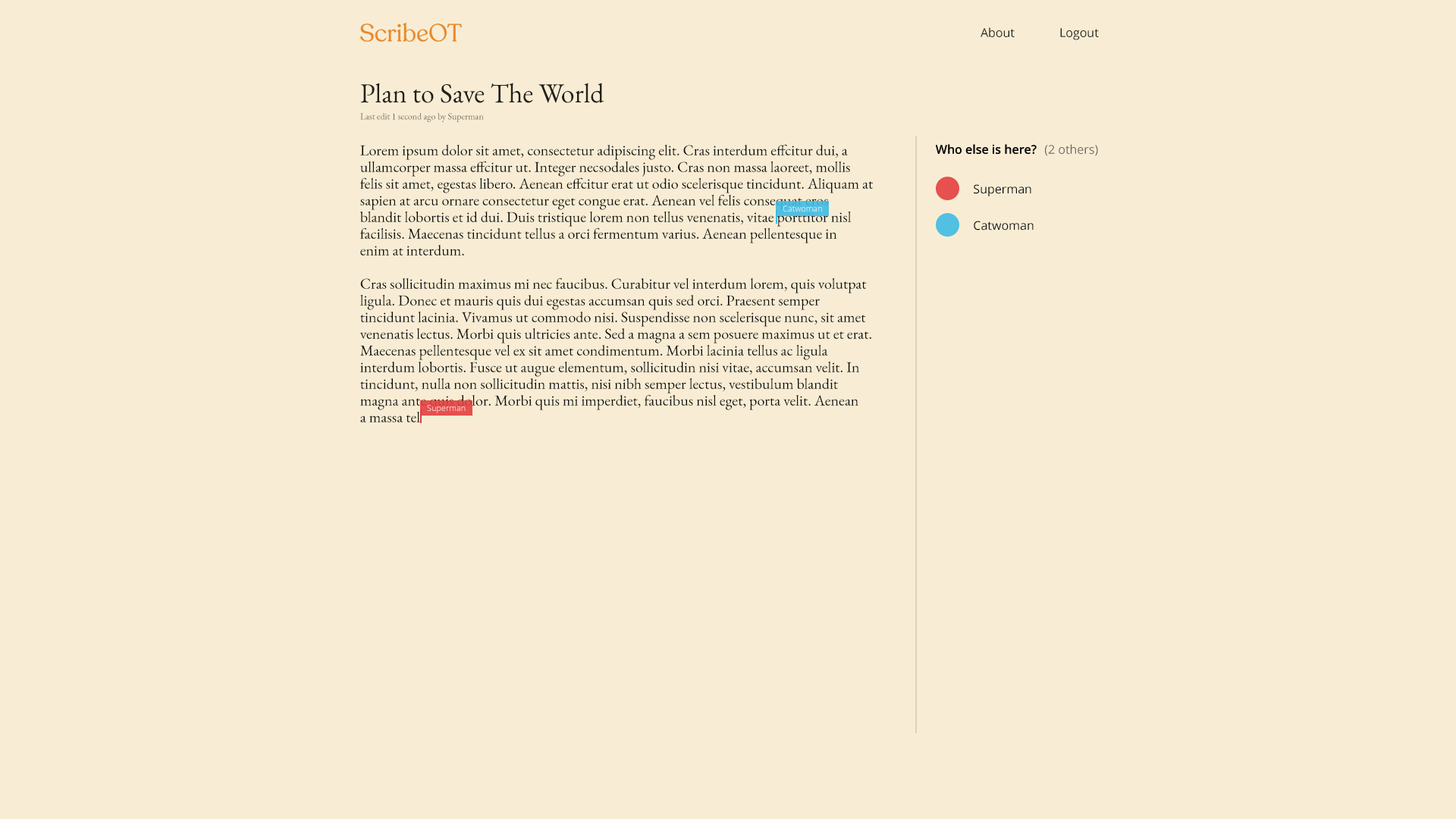
<style>
.page{position:relative;width:1456px;height:819px;background:#f8edd4}
.page>*{position:absolute;margin:0}
.t1{font:12.1px "OpenSans-Regular";color:#21201c}
.t2{font:27.3px "EBGaramond-Regular";color:#21201c}
.t3{font:9.1px "EBGaramond-Regular";color:#6d6a63}
.t4{font:15.2px/16.7px "EBGaramond-Regular";color:#0d0d0d}
.t5{font:12.1px "OpenSans-SemiBold";color:#0d0d0d}
.t6{font:12.1px "OpenSans-Regular";color:#6d6a63}
.t7{font:12.1px "OpenSans-Regular";color:#0d0d0d}
.t8{font:8.3px "OpenSans-Light"}
</style>
<div class="page">
<p class="t1" style="left:981px;top:27px;width:34px;height:10px">About</p>
<p class="t1" style="left:1060px;top:28px;width:39px;height:12px">Logout</p>
<p class="t2" style="left:360px;top:83px;width:244px;height:20px">Plan to Save The World</p>
<p class="t3" style="left:360px;top:113px;width:124px;height:9px">Last edit 1 second ago by Superman</p>
<p class="t4" style="left:359px;top:144px;width:514px;height:278px">Lorem ipsum dolor sit amet, consectetur adipiscing elit. Cras interdum effcitur dui, a <br>ullamcorper massa effcitur ut. Integer necsodales justo. Cras non massa laoreet, mollis <br>felis sit amet, egestas libero. Aenean effcitur erat ut odio scelerisque tincidunt. Aliquam at <br>sapien at arcu ornare consectetur eget congue erat. Aenean vel felis consequat eros <br>blandit lobortis et id dui. Duis tristique lorem non tellus venenatis, vitae porttitor nisl <br>facilisis. Maecenas tincidunt tellus a orci fermentum varius. Aenean pellentesque in <br>enim at interdum. <br><br>Cras sollicitudin maximus mi nec faucibus. Curabitur vel interdum lorem, quis volutpat <br>ligula. Donec et mauris quis dui egestas accumsan quis sed orci. Praesent semper <br>tincidunt lacinia. Vivamus ut commodo nisi. Suspendisse non scelerisque nunc, sit amet <br>venenatis lectus. Morbi quis ultricies ante. Sed a magna a sem posuere maximus ut et erat. <br>Maecenas pellentesque vel ex sit amet condimentum. Morbi lacinia tellus ac ligula <br>interdum lobortis. Fusce ut augue elementum, sollicitudin nisi vitae, accumsan velit. In <br>tincidunt, nulla non sollicitudin mattis, nisi nibh semper lectus, vestibulum blandit <br>magna ante quis dolor. Morbi quis mi imperdiet, faucibus nisl eget, porta velit. Aenean <br>a massa tel</p>
<p class="t5" style="left:936px;top:144px;width:101px;height:10px">Who else is here?</p>
<p class="t5" style="left:936px;top:144px;width:101px;height:10px">Who else is here?</p>
<p class="t6" style="left:1045px;top:144px;width:53px;height:12px">(2 others)</p>
<p class="t7" style="left:974px;top:184px;width:57px;height:12px">Superman</p>
<p class="t8" style="left:783px;top:206px;width:39px;height:6px">Catwoman</p>
<p class="t7" style="left:974px;top:221px;width:60px;height:10px">Catwoman</p>
<p class="t8" style="left:427px;top:405px;width:39px;height:8px">Superman</p>
</div>
